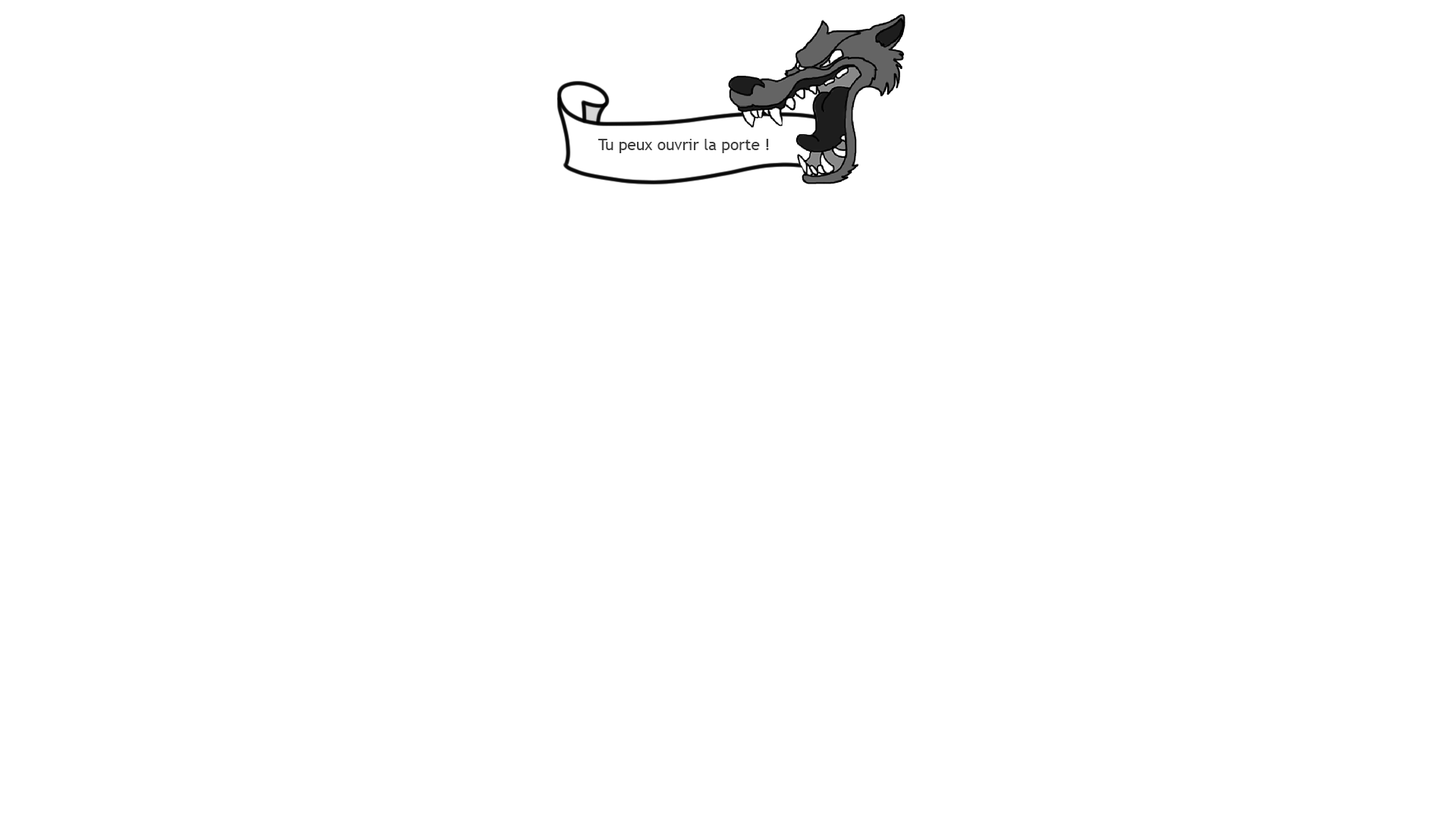
<style>
.page{position:relative;width:1456px;height:819px;background:#ffffff}
.page>*{position:absolute;margin:0}
.t1{font:15.8px "TrebuchetMS";color:#3e3e3e}
</style>
<div class="page">
<p class="t1" style="left:598px;top:139px;width:171px;height:14px">Tu peux ouvrir la porte !</p>
</div>
